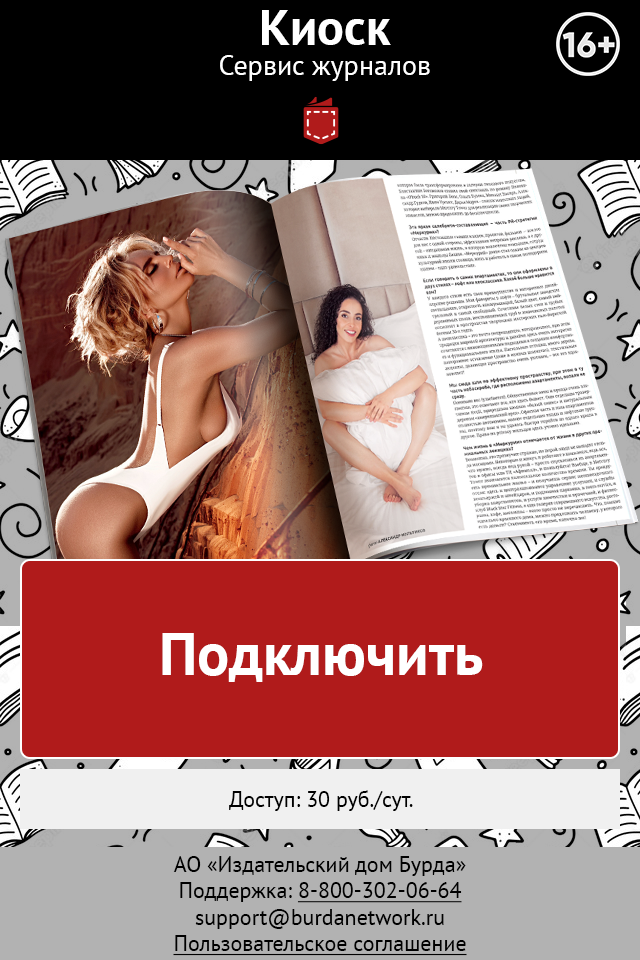
<style>
.page{position:relative;width:640px;height:960px}
.page>*{position:absolute;margin:0}
.t1{font:50px "PTSans-Bold";color:#ffffff}
.t2{font:28px "PTSans-Regular";color:#ffffff}
.t3{font:60px "PTSans-Bold";color:#ffffff}
.t4{font:22px "PTSans-Regular";color:#000000}
.t5{font:22px "PTSans-Regular";color:#000000;text-decoration:underline}
</style>
<div class="page">
<p class="t1" style="left:262px;top:10px;width:129px;height:35px">Киоск</p>
<p class="t2" style="left:220px;top:55px;width:210px;height:26px">Сервис журналов</p>
<p class="t3" style="left:162px;top:633px;width:321px;height:49px">Подключить</p>
<p class="t4" style="left:229px;top:790px;width:184px;height:21px">Доступ: 30 руб./сут.</p>
<p class="t4" style="left:173px;top:856px;width:294px;height:100px;text-align:center">АО «Издательский дом Бурда»<br>Поддержка: <span class="t5">8-800-302-06-64<br></span>support@burdanetwork.ru<br><span class="t5">Пользовательское соглашение</span></p>
</div>
